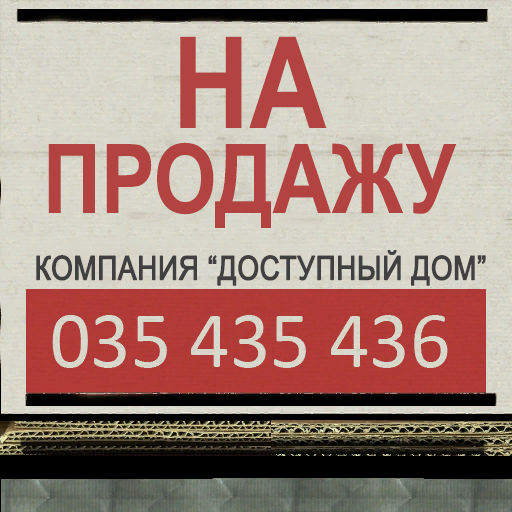
<style>
.page{position:relative;width:512px;height:512px}
.page>*{position:absolute;margin:0}
.t1{font:96px/85px "Arial-BoldMT";color:#b34340;scale:0.84 1}
.t2{font:127px/85px "Arial-BoldMT";color:#b34340;scale:0.84 1}
.t3{font:33px "ArialMT";color:#404040;font-weight:bold;scale:0.84 1}
</style>
<div class="page">
<p class="t1" style="left:48px;top:36px;width:409px;height:192px;text-align:center"><span class="t2">НА<br></span>ПРОДАЖУ</p>
<p class="t3" style="left:36px;top:250px;width:450px;height:36px">КОМПАНИЯ “ДОСТУПНЫЙ ДОМ”</p>
</div>
